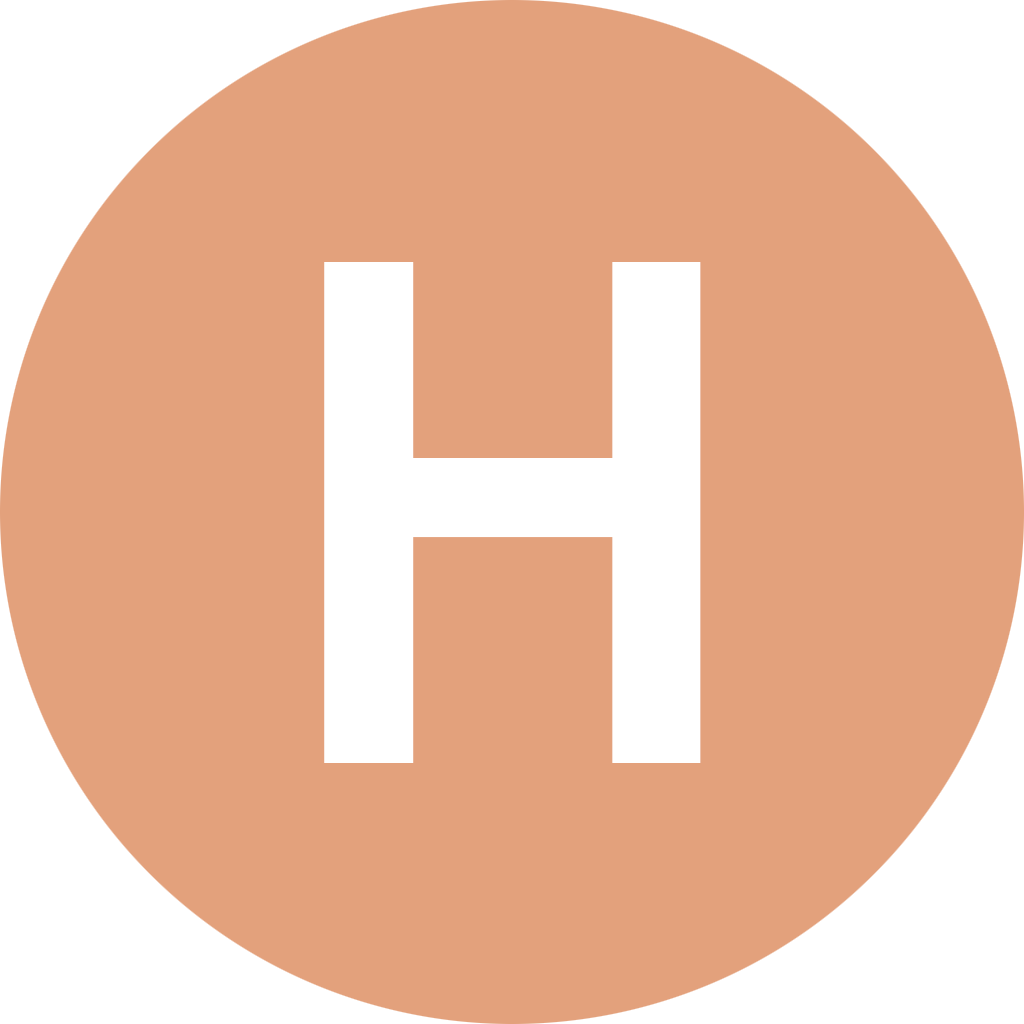
<style>
.page{position:relative;width:1024px;height:1024px;background:#e3a17c}
.page>*{position:absolute;margin:0}
.t1{font:700px "TrebuchetMS-Bold";color:#ffffff}
</style>
<div class="page">
<p class="t1" style="left:324px;top:262px;width:377px;height:501px">H</p>
</div>
